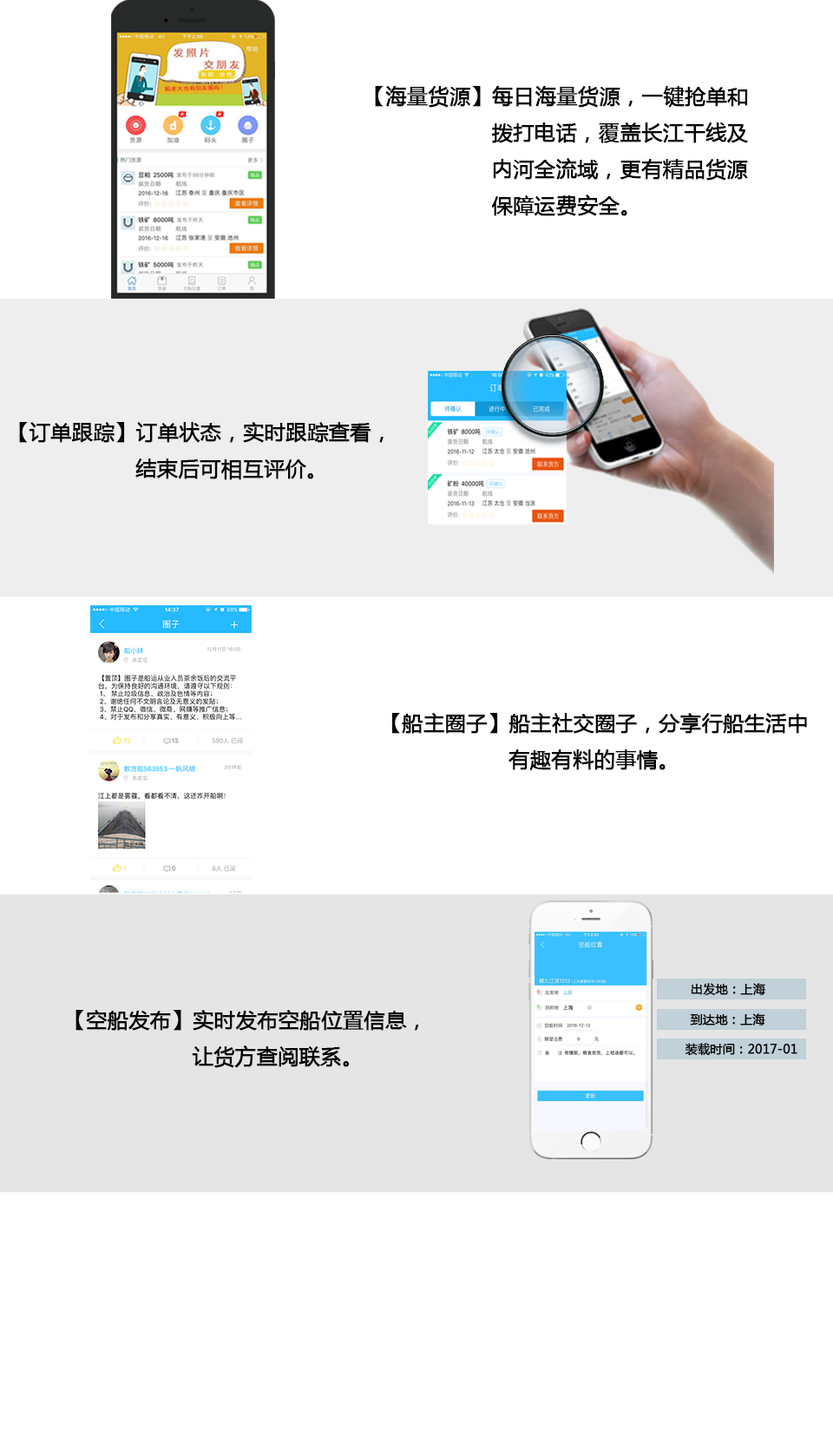
<style>
.page{position:relative;width:833px;height:1431px;background:#ffffff}
.page>*{position:absolute;margin:0}
.t1{font:20.8px "MicrosoftYaHei";color:#040404;font-weight:bold}
.t2{font:12.2px "MicrosoftYaHei";color:#040404;font-weight:bold}
</style>
<div class="page">
<p class="t1" style="left:375px;top:86px;width:373px;height:130px">【海量货源】每日海量货源，一键抢单和<br>                   拨打电话，覆盖长江干线及<br>                   内河全流域，更有精品货源<br>                   保障运费安全。</p>
<p class="t1" style="left:19px;top:422px;width:365px;height:58px">【订单跟踪】订单状态，实时跟踪查看，<br>                   结束后可相互评价。</p>
<p class="t1" style="left:392px;top:713px;width:415px;height:58px">【船主圈子】船主社交圈子，分享行船生活中<br>                   有趣有料的事情。</p>
<p class="t2" style="left:691px;top:983px;width:75px;height:12px">出发地：上海</p>
<p class="t1" style="left:76px;top:1010px;width:343px;height:58px">【空船发布】实时发布空船位置信息，<br>                   让货方查阅联系。</p>
<p class="t2" style="left:690px;top:1013px;width:76px;height:12px">到达地：上海</p>
<p class="t2" style="left:685px;top:1043px;width:113px;height:13px">装载时间：2017-01</p>
</div>
